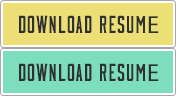
<style>
.page{position:relative;width:176px;height:96px;background:#ecdf75}
.page>*{position:absolute;margin:0}
.t1{font:24.8px "Moonshiner-Sharp";letter-spacing:0.04em;color:#2f3131;text-transform:uppercase}
.t2{font:24.8px "MyriadPro-Regular";letter-spacing:0.04em;color:#2f3131;text-transform:uppercase}
</style>
<div class="page">
<p class="t1" style="left:18px;top:15px;width:141px;height:18px">DOWNLOAD RESUM<span class="t2">E</span></p>
<p class="t1" style="left:18px;top:63px;width:141px;height:18px">DOWNLOAD RESUM<span class="t2">E</span></p>
</div>
